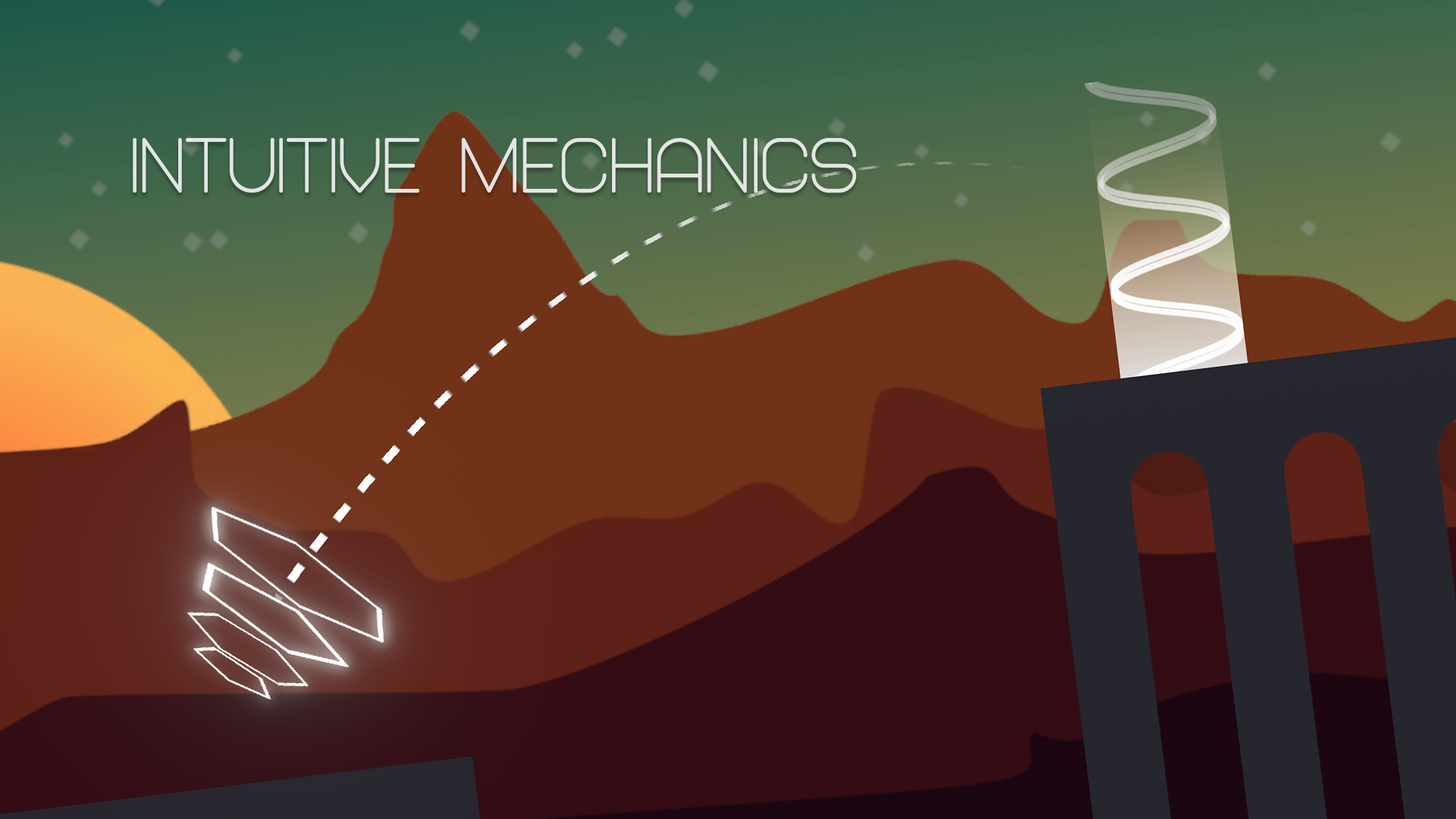
<style>
.page{position:relative;width:1456px;height:819px}
.page>*{position:absolute;margin:0}
.t1{font:80.3px "Abandoned-Bold";color:#e2e6e3}
</style>
<div class="page">
<p class="t1" style="left:133px;top:137px;width:724px;height:56px">Intuitive Mechanics</p>
</div>
